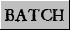
<style>
.page{position:relative;width:70px;height:30px;background:#bfbfbf}
.page>*{position:absolute;margin:0}
.t1{font:18px "JSL-Ancient";color:#000000}
</style>
<div class="page">
<p class="t1" style="left:4px;top:9px;width:60px;height:13px">BATCH</p>
</div>
